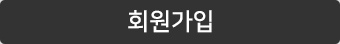
<style>
.page{position:relative;width:340px;height:44px;background:#333333}
.page>*{position:absolute;margin:0}
.t1{font:24px "NanumSquareB";color:#ffffff}
</style>
<div class="page">
<p class="t1" style="left:128px;top:10px;width:84px;height:23px">회원가입</p>
</div>
